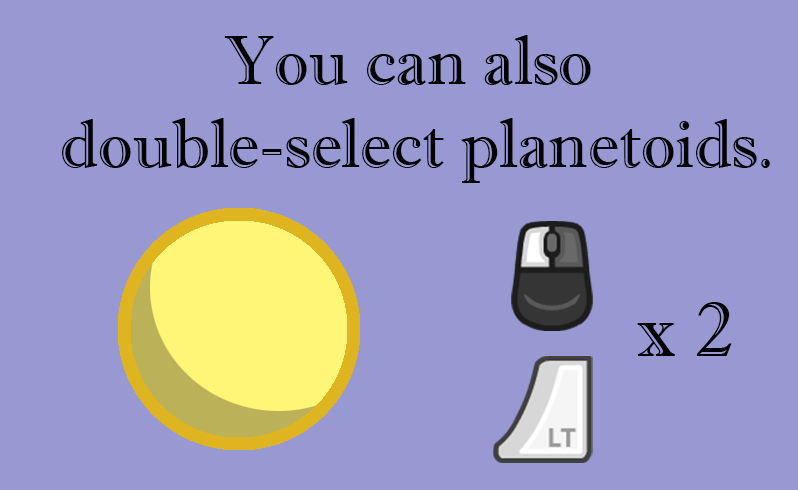
<style>
.page{position:relative;width:798px;height:490px;background:#9898d3}
.page>*{position:absolute;margin:0}
.t1{font:68.7px "ImprintMT-Shadow";color:#030303}
.t2{font:77px "ImprintMT-Shadow";color:#030303}
</style>
<div class="page">
<p class="t1" style="left:62px;top:35px;width:708px;height:148px;text-align:center">You can also <br>double-select planetoids.</p>
<p class="t2" style="left:637px;top:302px;width:95px;height:54px">x 2</p>
</div>
